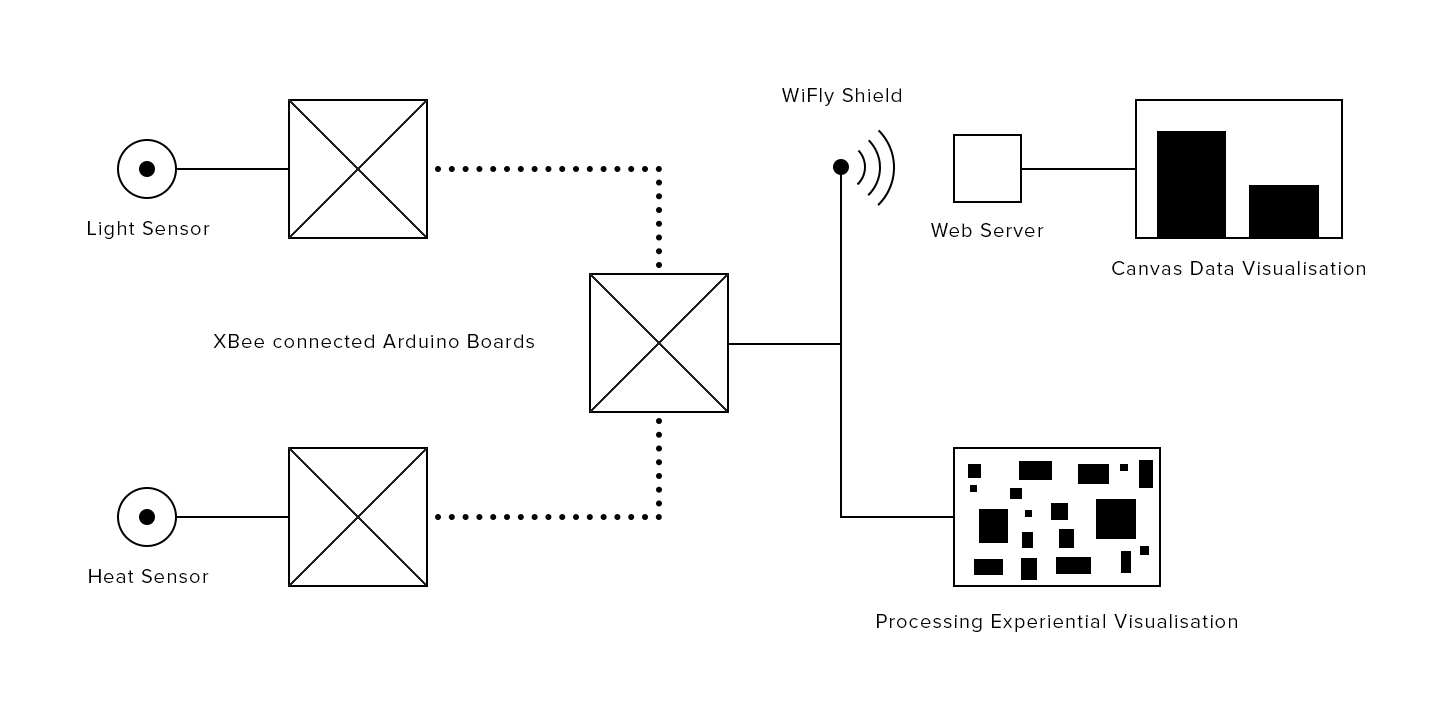
<style>
.page{position:relative;width:1440px;height:720px;background:#ffffff}
.page>*{position:absolute;margin:0}
.t1{font:20px "ProximaNova-Regular";letter-spacing:0.06em;color:#000000}
</style>
<div class="page">
<p class="t1" style="left:782px;top:88px;width:119px;height:18px">WiFly Shield</p>
<p class="t1" style="left:88px;top:221px;width:122px;height:18px">Light Sensor</p>
<p class="t1" style="left:931px;top:223px;width:113px;height:14px">Web Server</p>
<p class="t1" style="left:1112px;top:261px;width:253px;height:14px">Canvas Data Visualisation</p>
<p class="t1" style="left:213px;top:334px;width:321px;height:14px">XBee connected Arduino Boards</p>
<p class="t1" style="left:89px;top:569px;width:120px;height:14px">Heat Sensor</p>
<p class="t1" style="left:877px;top:614px;width:360px;height:18px">Processing Experiential Visualisation</p>
</div>
